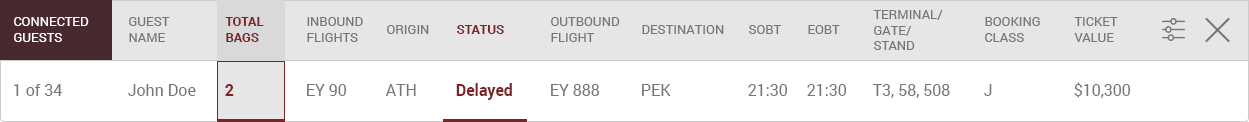
<style>
.page{position:relative;width:1249px;height:122px;background:#ffffff}
.page>*{position:absolute;margin:0}
.t1{font:13px "Roboto-Regular";color:#ffffff;text-transform:uppercase}
.t2{font:13px "Roboto-Regular";color:#767676;text-transform:uppercase}
.t3{font:13px "Roboto-Bold";color:#7b2326;text-transform:uppercase}
.t4{font:16px "Roboto-Regular";color:#767676}
.t5{font:16px "Roboto-Bold";color:#7b2326}
</style>
<div class="page">
<p class="t1" style="left:14px;top:17px;width:75px;height:25px">Connected<br>Guests</p>
<p class="t2" style="left:129px;top:17px;width:41px;height:25px">Guest<br>Name</p>
<p class="t3" style="left:225px;top:17px;width:39px;height:25px">Total<br>Bags</p>
<p class="t2" style="left:307px;top:17px;width:56px;height:25px">Inbound<br>Flights</p>
<p class="t2" style="left:551px;top:17px;width:69px;height:25px">Outbound<br>Flight</p>
<p class="t2" style="left:873px;top:10px;width:70px;height:40px">Terminal/<br>Gate/<br>Stand</p>
<p class="t2" style="left:985px;top:17px;width:55px;height:25px">Booking<br>Class</p>
<p class="t2" style="left:1074px;top:17px;width:44px;height:25px">Ticket<br>Value</p>
<p class="t2" style="left:387px;top:25px;width:42px;height:9px">Origin</p>
<p class="t3" style="left:457px;top:25px;width:47px;height:9px">Status</p>
<p class="t2" style="left:642px;top:25px;width:82px;height:9px">Destination</p>
<p class="t2" style="left:749px;top:25px;width:32px;height:9px">SOBT</p>
<p class="t2" style="left:808px;top:25px;width:32px;height:9px">EOBT</p>
<p class="t4" style="left:14px;top:84px;width:48px;height:12px">1 of 34</p>
<p class="t4" style="left:128px;top:84px;width:68px;height:12px">John Doe</p>
<p class="t5" style="left:225px;top:84px;width:9px;height:12px">2</p>
<p class="t4" style="left:307px;top:84px;width:39px;height:12px">EY 90</p>
<p class="t4" style="left:385px;top:84px;width:31px;height:12px">ATH</p>
<p class="t5" style="left:456px;top:83px;width:56px;height:17px">Delayed</p>
<p class="t4" style="left:551px;top:84px;width:49px;height:12px">EY 888</p>
<p class="t4" style="left:642px;top:84px;width:29px;height:12px">PEK</p>
<p class="t4" style="left:748px;top:84px;width:39px;height:12px">21:30</p>
<p class="t4" style="left:807px;top:84px;width:39px;height:12px">21:30</p>
<p class="t4" style="left:872px;top:84px;width:78px;height:14px">T3, 58, 508</p>
<p class="t4" style="left:984px;top:84px;width:8px;height:12px">J</p>
<p class="t4" style="left:1074px;top:82px;width:56px;height:16px">$10,300</p>
</div>
